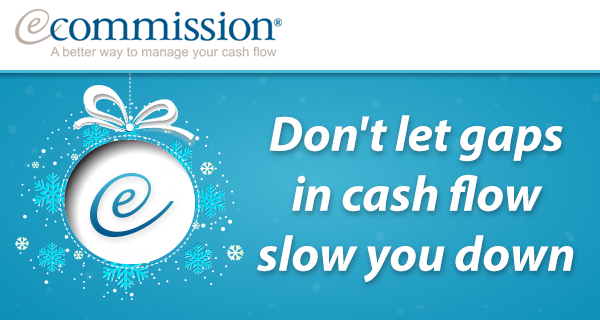
<style>
.page{position:relative;width:600px;height:320px;background:#ffffff}
.page>*{position:absolute;margin:0}
.t1{font:50px "MyriadPro-BoldIt";color:#ffffff}
</style>
<div class="page">
<p class="t1" style="left:257px;top:115px;width:317px;height:168px;text-align:center">Don't let gaps in cash flow slow you down</p>
</div>
